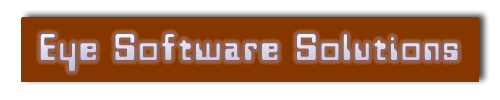
<style>
.page{position:relative;width:500px;height:100px;background:#863700}
.page>*{position:absolute;margin:0}
.t1{font:40px "Westminster";letter-spacing:0.1em;color:#d7d4e7}
</style>
<div class="page">
<p class="t1" style="left:40px;top:34px;width:418px;height:37px">Eye Software Solutions</p>
</div>
